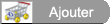
<style>
.page{position:relative;width:110px;height:24px;background:#999999}
.page>*{position:absolute;margin:0}
.t1{font:14px "ArialMT";color:#ffffff}
</style>
<div class="page">
<p class="t1" style="left:49px;top:5px;width:45px;height:17px">Ajouter</p>
</div>
